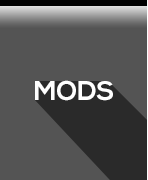
<style>
.page{position:relative;width:148px;height:180px;background:#545454}
.page>*{position:absolute;margin:0}
.t1{font:26.8px "NexaBold";color:#ffffff}
</style>
<div class="page">
<p class="t1" style="left:35px;top:80px;width:78px;height:21px">MODS</p>
</div>
